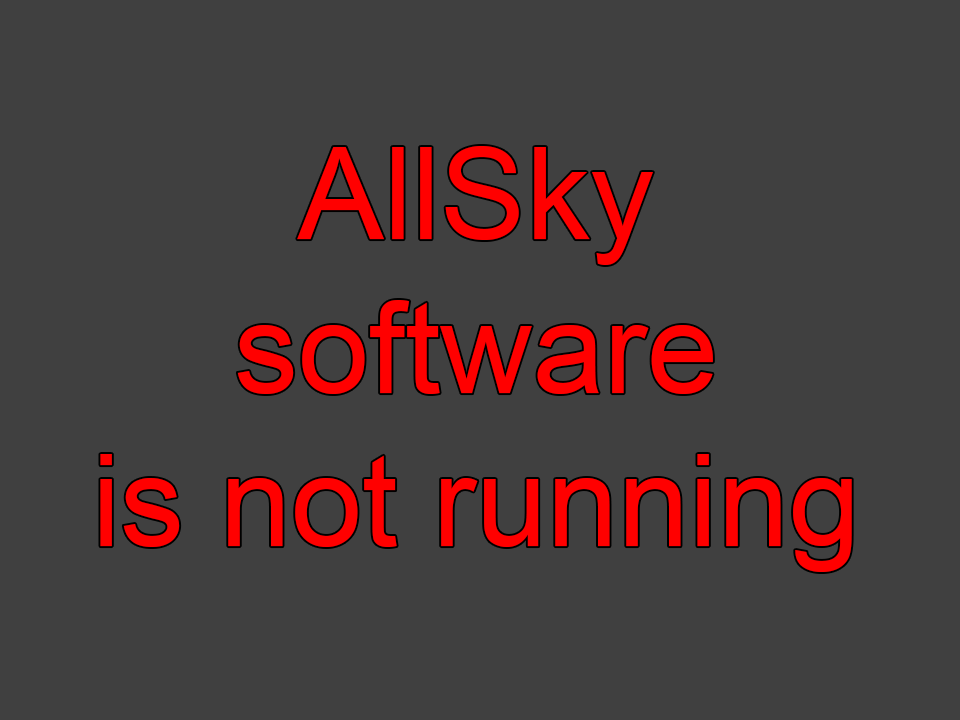
<style>
.page{position:relative;width:960px;height:720px;background:#404040}
.page>*{position:absolute;margin:0}
.t1{font:128px "ArialMT";color:#ff0000}
</style>
<div class="page">
<p class="t1" style="left:100px;top:146px;width:752px;height:426px;text-align:center">AllSky<br>software<br>is not running</p>
</div>
